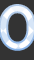
<style>
.page{position:relative;width:34px;height:60px;background:#333333}
.page>*{position:absolute;margin:0}
.t1{font:60px "Outfit-Regular";font-weight:bold;font-style:italic}
</style>
<div class="page">
<p class="t1" style="left:0px;top:6px;width:35px;height:43px">0</p>
</div>
